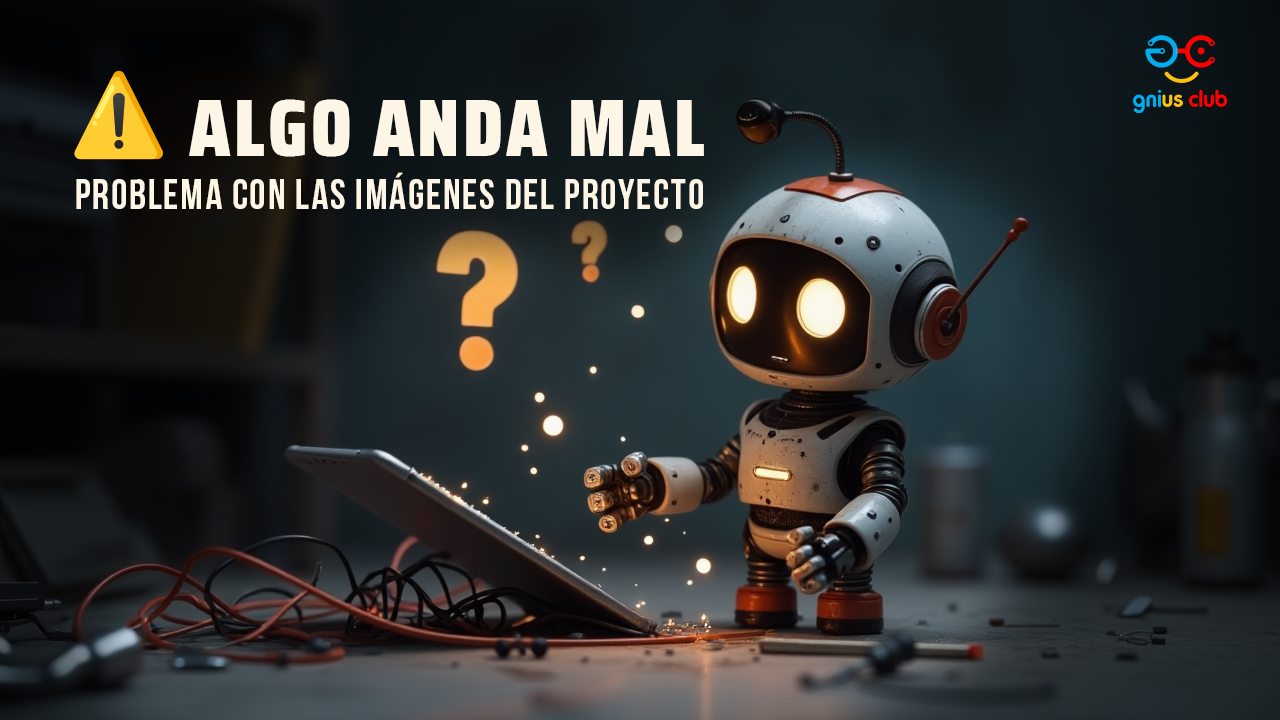
<style>
.page{position:relative;width:1280px;height:720px}
.page>*{position:absolute;margin:0}
.t1{font:80.2px "SairaCondensed-Black";letter-spacing:0.04em;color:#fdf6e7;text-transform:uppercase}
.t2{font:80.2px "NotoColorEmoji-SVG";letter-spacing:0.04em;color:#fdf6e7}
.t3{font:41.8px "BebasNeueBold";letter-spacing:0.04em;color:#fdf6e7}
</style>
<div class="page">
<p class="t1" style="left:74px;top:70px;width:630px;height:90px"><span class="t2">⚠️ </span>Algo anda mal</p>
<p class="t3" style="left:76px;top:172px;width:627px;height:37px">Problema con las imágenes del proyecto</p>
</div>
